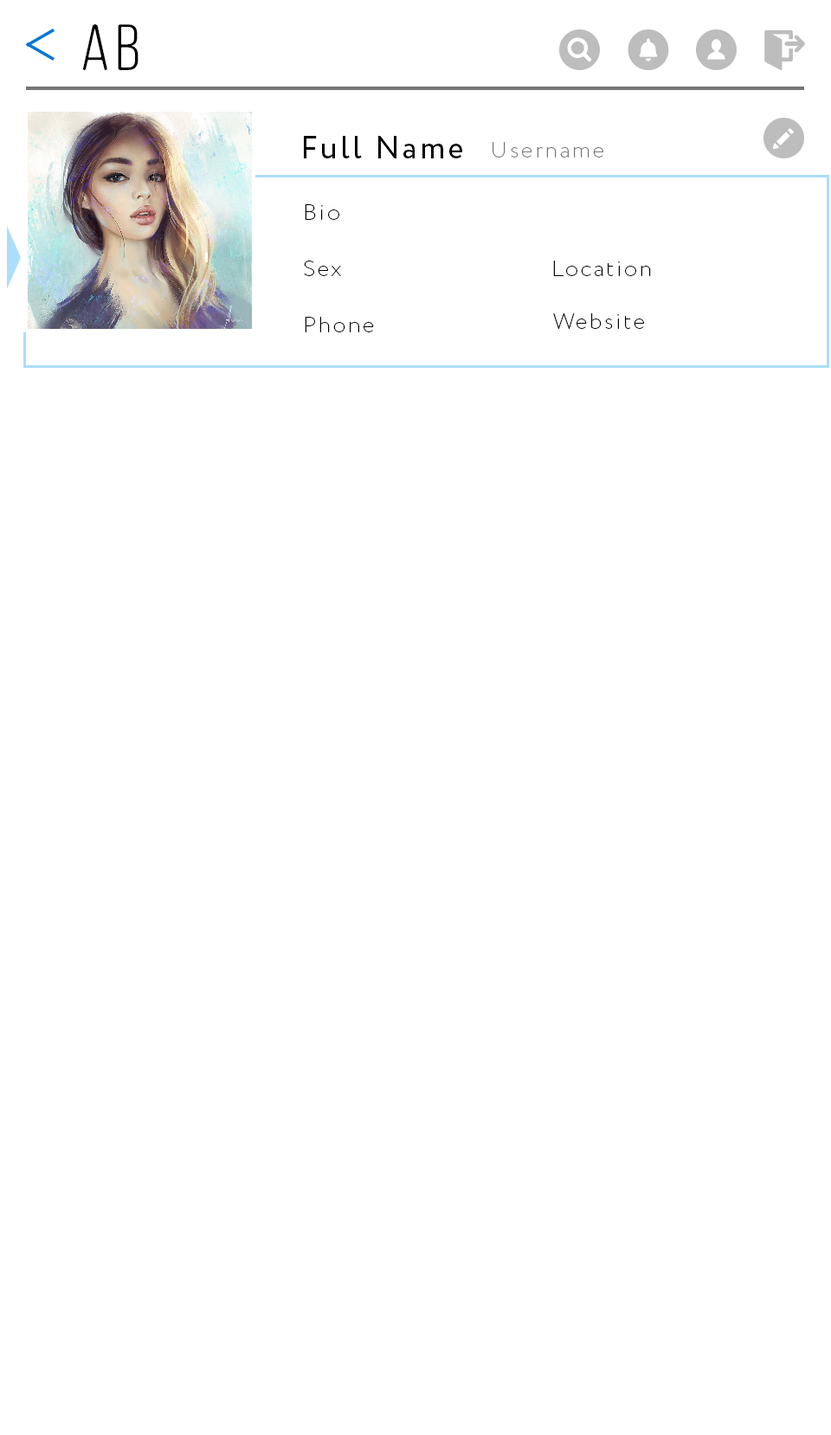
<style>
.page{position:relative;width:831px;height:1435px;background:#ffffff}
.page>*{position:absolute;margin:0}
.t1{font:65.4px "ClutchSans-Regular";letter-spacing:0.1em;color:#000000}
.t2{font:31.2px "Circe-Regular";letter-spacing:0.1em;color:#000000}
.t3{font:22.5px "Circe-ExtraLight";letter-spacing:0.1em;color:#757575}
.t4{font:22.5px "Circe-ExtraLight";letter-spacing:0.1em;color:#000000}
</style>
<div class="page">
<p class="t1" style="left:83px;top:24px;width:55px;height:46px">Ab</p>
<p class="t2" style="left:304px;top:136px;width:158px;height:22px">Full Name</p>
<p class="t3" style="left:492px;top:142px;width:111px;height:16px">Username</p>
<p class="t4" style="left:305px;top:204px;width:34px;height:16px">Bio</p>
<p class="t4" style="left:304px;top:261px;width:37px;height:15px">Sex</p>
<p class="t4" style="left:553px;top:261px;width:98px;height:15px">Location</p>
<p class="t4" style="left:305px;top:317px;width:69px;height:15px">Phone</p>
<p class="t4" style="left:553px;top:313px;width:91px;height:16px">Website</p>
</div>
